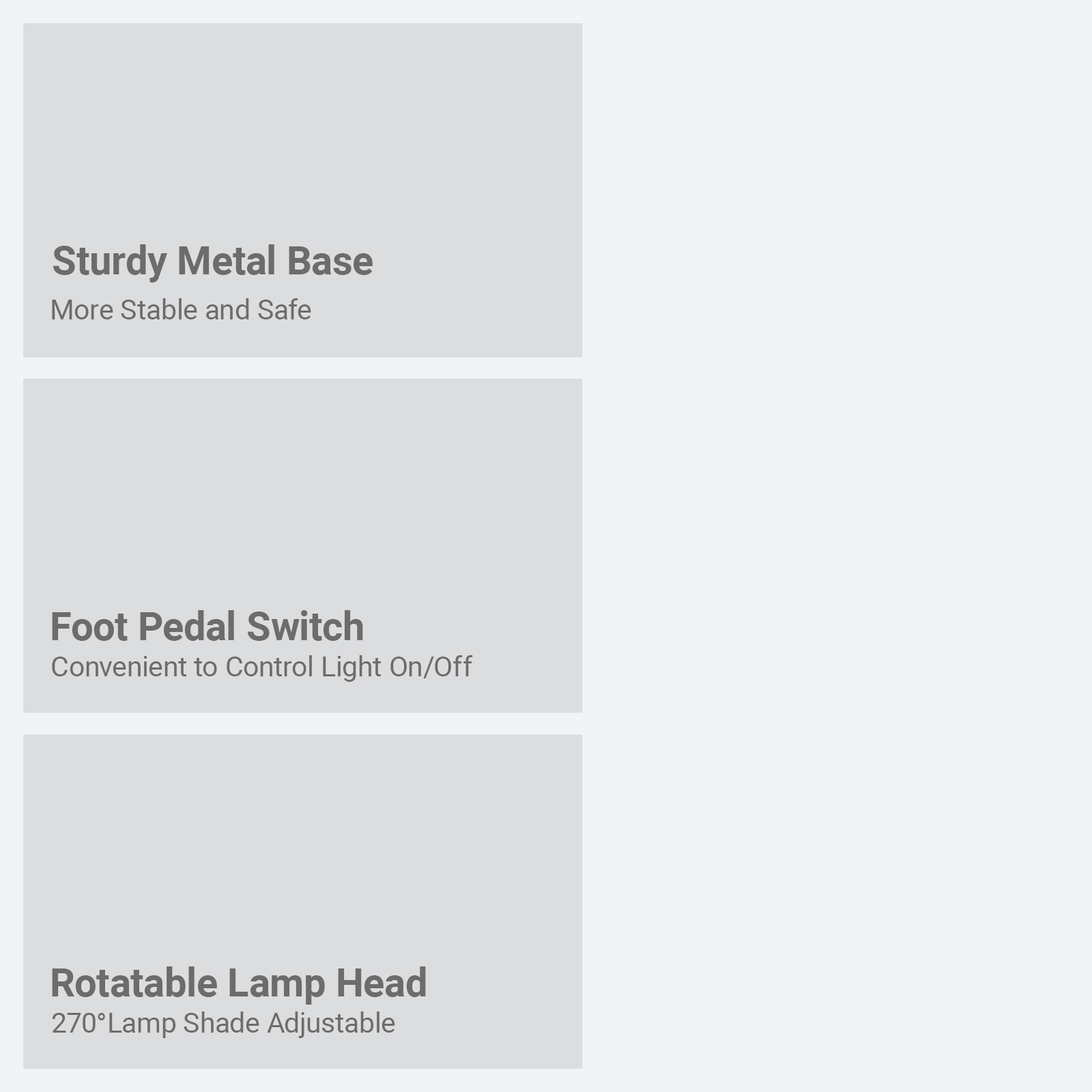
<style>
.page{position:relative;width:1092px;height:1092px;background:#f2f3f6}
.page>*{position:absolute;margin:0}
.t1{font:39.3px "Roboto-Bold";color:#6c6c6c}
.t2{font:27.7px "Roboto-Regular";color:#6c6c6c}
</style>
<div class="page">
<p class="t1" style="left:53px;top:244px;width:320px;height:39px">Sturdy Metal Base</p>
<p class="t2" style="left:52px;top:298px;width:259px;height:21px">More Stable and Safe</p>
<p class="t1" style="left:52px;top:610px;width:311px;height:31px">Foot Pedal Switch</p>
<p class="t2" style="left:52px;top:655px;width:421px;height:27px">Convenient to Control Light On/Off</p>
<p class="t1" style="left:52px;top:966px;width:374px;height:39px">Rotatable Lamp Head</p>
<p class="t2" style="left:52px;top:1011px;width:343px;height:27px">270°Lamp Shade Adjustable</p>
</div>
